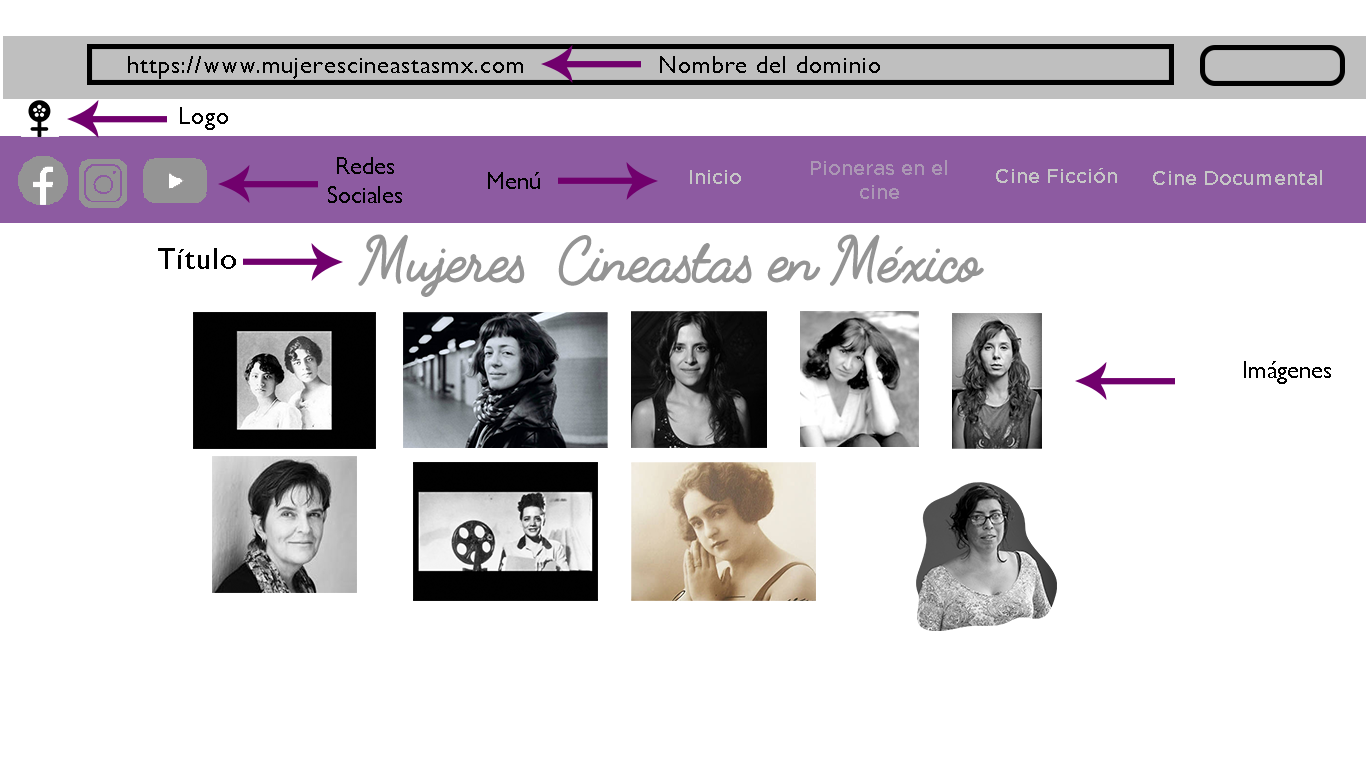
<style>
.page{position:relative;width:1366px;height:768px;background:#ffffff}
.page>*{position:absolute;margin:0}
.t1{font:24px "GillSansMT";letter-spacing:0.04em;color:#000000}
.t2{font:24px "GillSansMT";color:#000000}
.t3{font:20px "GothamMedium";color:#ab97b4}
.t4{font:20px "GothamMedium";color:#c6c6c6}
.t5{font:60px "FabfeltScript-Bold";color:#949494}
.t6{font:30px "GillSansMT";letter-spacing:0.04em;color:#000000}
</style>
<div class="page">
<p class="t1" style="left:128px;top:56px;width:395px;height:23px">https://www.mujerescineastasmx.com</p>
<p class="t1" style="left:660px;top:56px;width:220px;height:17px">Nombre del dominio</p>
<p class="t1" style="left:180px;top:107px;width:48px;height:23px">Logo</p>
<p class="t2" style="left:328px;top:157px;width:74px;height:46px;text-align:center">Redes <br>Sociales</p>
<p class="t3" style="left:811px;top:160px;width:136px;height:39px;text-align:center">Pioneras en el cine</p>
<p class="t2" style="left:488px;top:172px;width:52px;height:17px">Menú</p>
<p class="t4" style="left:690px;top:170px;width:51px;height:14px">Inicio</p>
<p class="t4" style="left:996px;top:168px;width:121px;height:15px">Cine Ficción</p>
<p class="t4" style="left:1153px;top:170px;width:169px;height:15px">Cine Documental</p>
<p class="t5" style="left:358px;top:234px;width:626px;height:63px">Mujeres  Cineastas en México</p>
<p class="t6" style="left:158px;top:248px;width:78px;height:21px">Título</p>
<p class="t2" style="left:1244px;top:361px;width:87px;height:23px">Imágenes</p>
</div>
